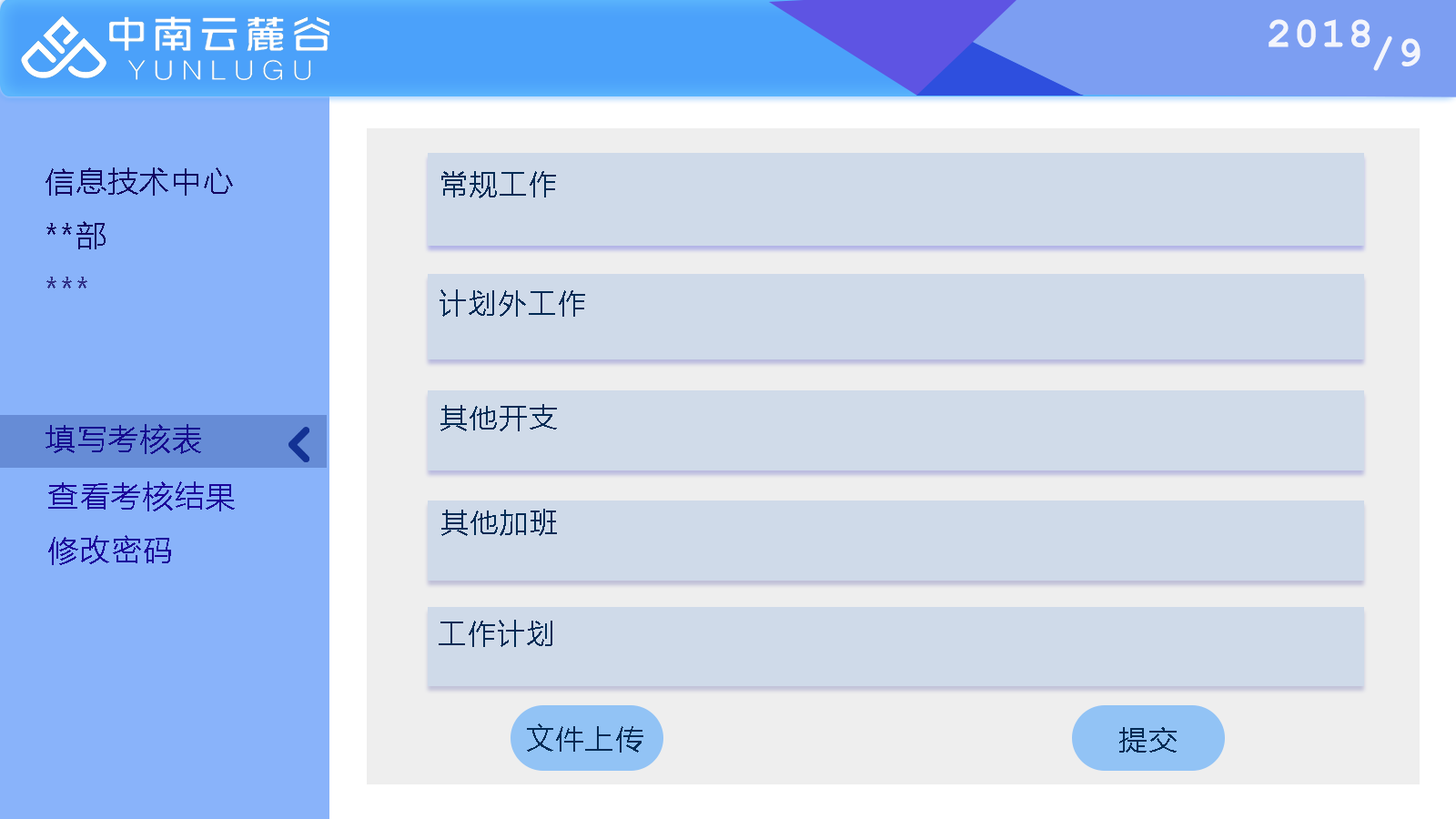
<style>
.page{position:relative;width:1456px;height:819px;background:#cfdae9}
.page>*{position:absolute;margin:0}
.t1{font:41.7px "CourierNewPS-BoldMT";letter-spacing:0.05em;color:#f3f5fc}
.t2{font:30.3px "MicrosoftYaHei";letter-spacing:0.05em;color:#130461}
.t3{font:28.4px "MicrosoftYaHeiUI";letter-spacing:0.05em;color:#032b55}
.t4{font:30.3px "MicrosoftYaHei";letter-spacing:0.05em;color:#303087}
.t5{font:30.3px "MicrosoftYaHei";letter-spacing:0.05em;color:#1c039a}
</style>
<div class="page">
<p class="t1" style="left:1269px;top:19px;width:101px;height:28px">2018</p>
<p class="t1" style="left:1373px;top:35px;width:47px;height:36px">/9</p>
<p class="t2" style="left:45px;top:167px;width:188px;height:29px">信息技术中心</p>
<p class="t3" style="left:441px;top:171px;width:115px;height:27px">常规工作</p>
<p class="t2" style="left:46px;top:221px;width:60px;height:28px">**部</p>
<p class="t4" style="left:46px;top:277px;width:41px;height:11px">***</p>
<p class="t3" style="left:440px;top:289px;width:145px;height:28px">计划外工作</p>
<p class="t3" style="left:440px;top:404px;width:117px;height:27px">其他开支</p>
<p class="t5" style="left:45px;top:424px;width:156px;height:30px">填写考核表</p>
<p class="t5" style="left:48px;top:481px;width:187px;height:30px">查看考核结果</p>
<p class="t3" style="left:441px;top:509px;width:116px;height:27px">其他加班</p>
<p class="t5" style="left:48px;top:535px;width:123px;height:30px">修改密码</p>
<p class="t3" style="left:439px;top:620px;width:113px;height:27px">工作计划</p>
<p class="t3" style="left:527px;top:723px;width:116px;height:30px">文件上传</p>
<p class="t3" style="left:1119px;top:727px;width:58px;height:26px">提交</p>
</div>
